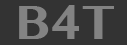
<style>
.page{position:relative;width:127px;height:45px;background:#333333}
.page>*{position:absolute;margin:0}
.t1{font:48px "MyanmarMN-Bold";color:#838383}
</style>
<div class="page">
<p class="t1" style="left:19px;top:5px;width:95px;height:34px">B4T</p>
</div>
